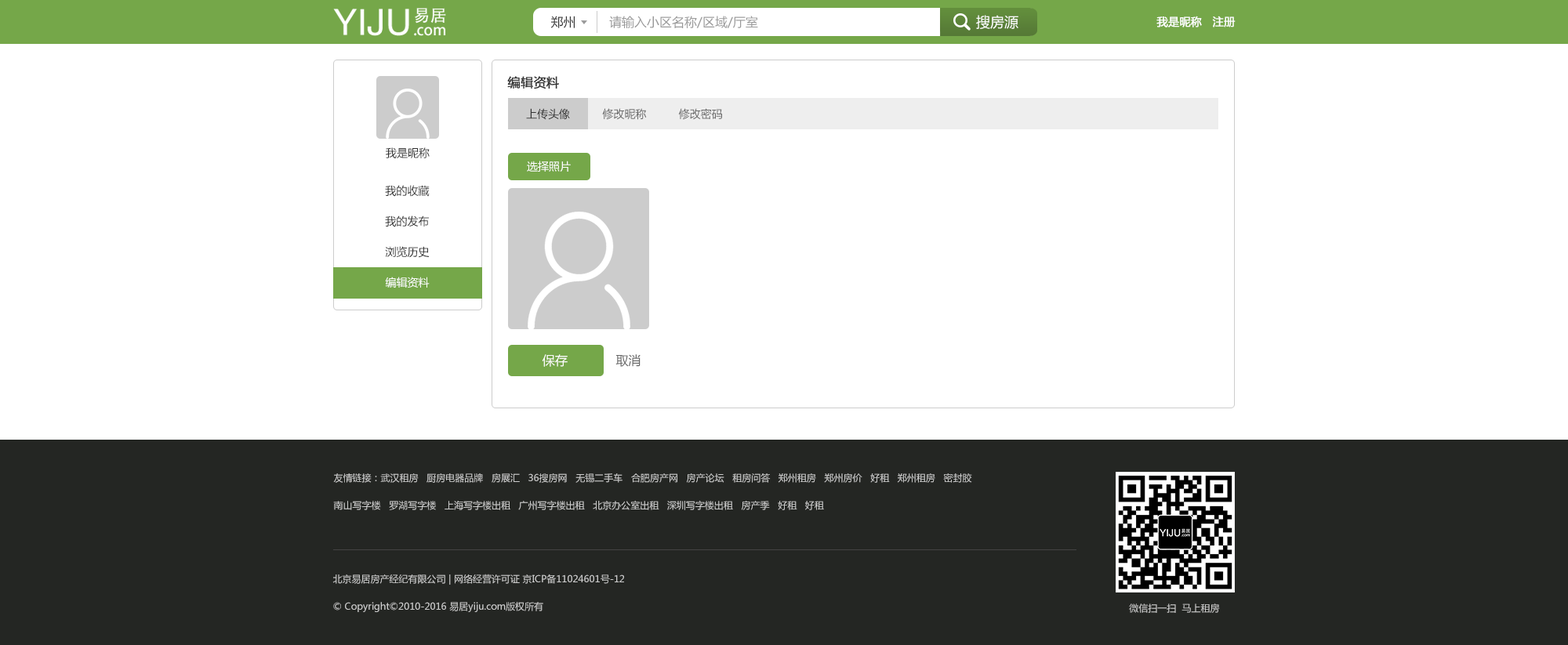
<style>
.page{position:relative;width:1568px;height:645px;background:#ffffff}
.page>*{position:absolute;margin:0}
.t1{font:12.5px "MicrosoftYaHei";color:#999999}
.t2{font:12.5px "MicrosoftYaHei";color:#333333}
.t3{font:14.1px "MicrosoftYaHei";color:#ffffff}
.t4{font:11px "MicrosoftYaHei";color:#ffffff;font-weight:bold}
.t5{font:12.5px "MicrosoftYaHei";color:#333333;font-weight:bold}
.t6{font:11px "MicrosoftYaHei";color:#666666}
.t7{font:11px "MicrosoftYaHei";color:#333333}
.t8{font:11px "MicrosoftYaHei";color:#fffefe}
.t9{font:11px/30.6px "MicrosoftYaHei";color:#333333}
.t10{font:11px/30.6px "MicrosoftYaHei";color:#ffffff}
.t11{font:9.4px/27.4px "MicrosoftYaHei";color:#cccccc}
.t12{font:9.4px "MicrosoftYaHei";color:#cccccc}
</style>
<div class="page">
<p class="t1" style="left:550px;top:16px;width:208px;height:12px"><span class="t2">郑州         </span>请输入小区名称/区域/厅室</p>
<p class="t3" style="left:976px;top:15px;width:42px;height:14px">搜房源</p>
<p class="t4" style="left:1156px;top:16px;width:80px;height:11px">我是昵称   注册</p>
<p class="t5" style="left:507px;top:76px;width:52px;height:13px">编辑资料</p>
<p class="t6" style="left:526px;top:108px;width:196px;height:12px"><span class="t7">上传头像</span>          修改昵称          修改密码</p>
<p class="t7" style="left:386px;top:147px;width:44px;height:11px">我是昵称</p>
<p class="t8" style="left:527px;top:161px;width:44px;height:11px">选择照片</p>
<p class="t9" style="left:385px;top:185px;width:45px;height:103px">我的收藏<br>我的发布<br>浏览历史<br><span class="t10">编辑资料</span></p>
<p class="t11" style="left:333px;top:474px;width:639px;height:36px">友情链接：武汉租房   厨房电器品牌   房展汇   36搜房网   无锡二手车   合肥房产网   房产论坛   租房问答   郑州租房   郑州房价   好租   郑州租房   密封胶   <br>南山写字楼   罗湖写字楼   上海写字楼出租   广州写字楼出租   北京办公室出租   深圳写字楼出租   房产季   好租   好租</p>
<p class="t11" style="left:332px;top:574px;width:292px;height:38px">北京易居房产经纪有限公司 | 网络经营许可证 京ICP备11024601号-12<br>© Copyright©2010-2016 易居yiju.com版权所有</p>
<p class="t12" style="left:1129px;top:604px;width:91px;height:9px">微信扫一扫  马上租房</p>
</div>
